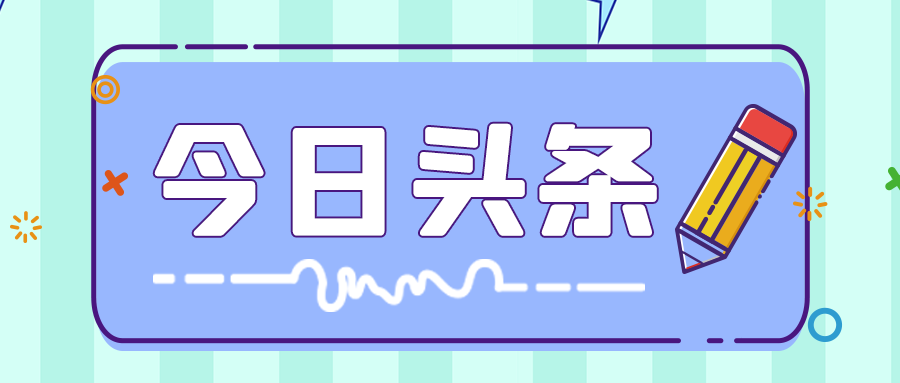
<style>
.page{position:relative;width:900px;height:383px;background:#98b7fe}
.page>*{position:absolute;margin:0}
.t1{font:127px "zhfyh";letter-spacing:0.02em;color:#ffffff}
</style>
<div class="page">
<p class="t1" style="left:154px;top:123px;width:503px;height:113px">今日头条</p>
</div>
